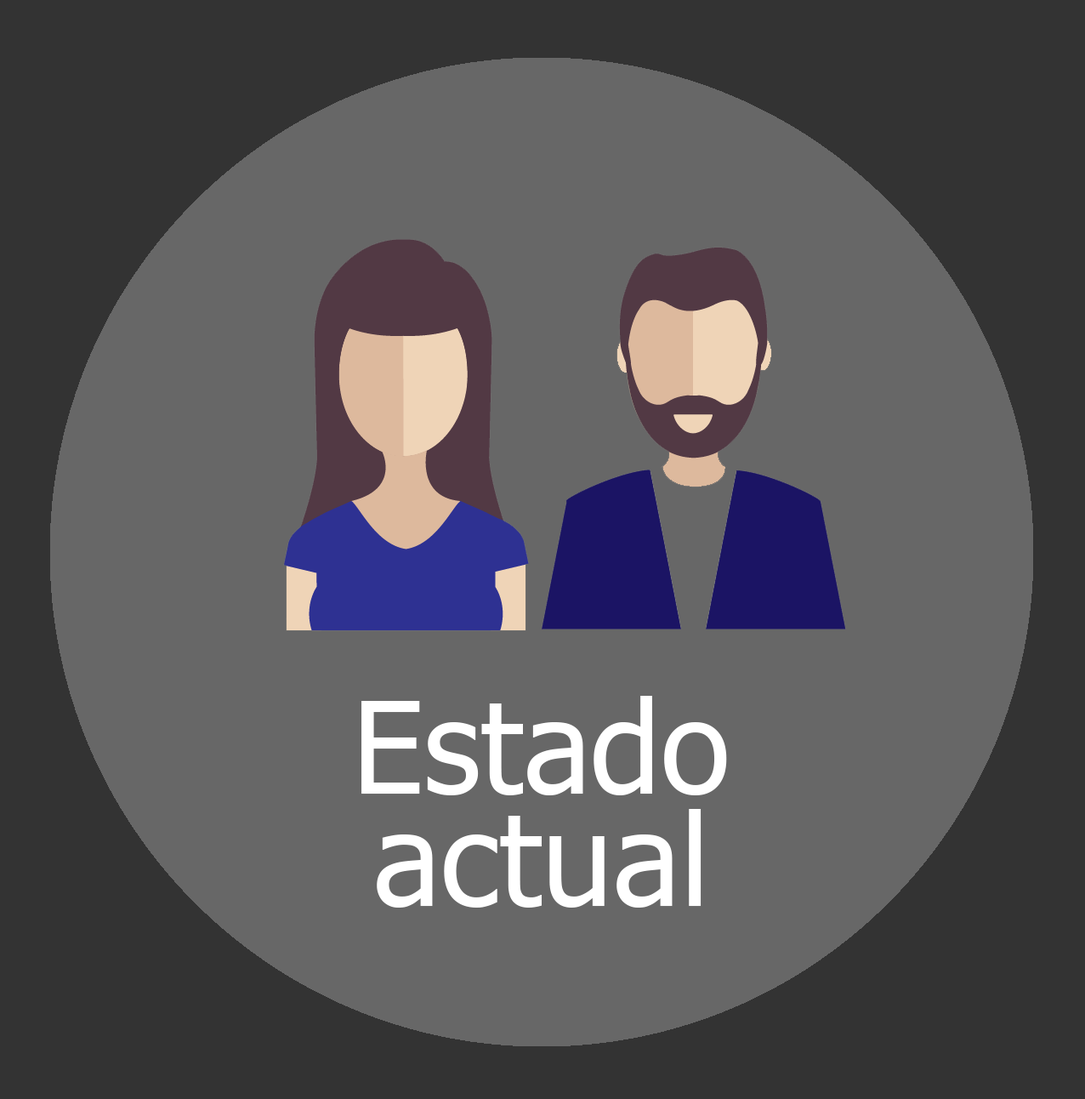
<style>
.page{position:relative;width:1085px;height:1099px;background:#676767}
.page>*{position:absolute;margin:0}
.t1{font:127.6px/14px "Tahoma";color:#ffffff}
</style>
<div class="page">
<p class="t1" style="left:361px;top:696px;width:366px;height:211px;text-align:center">Estado<br><br><br><br><br><br><br><br>actual</p>
</div>
